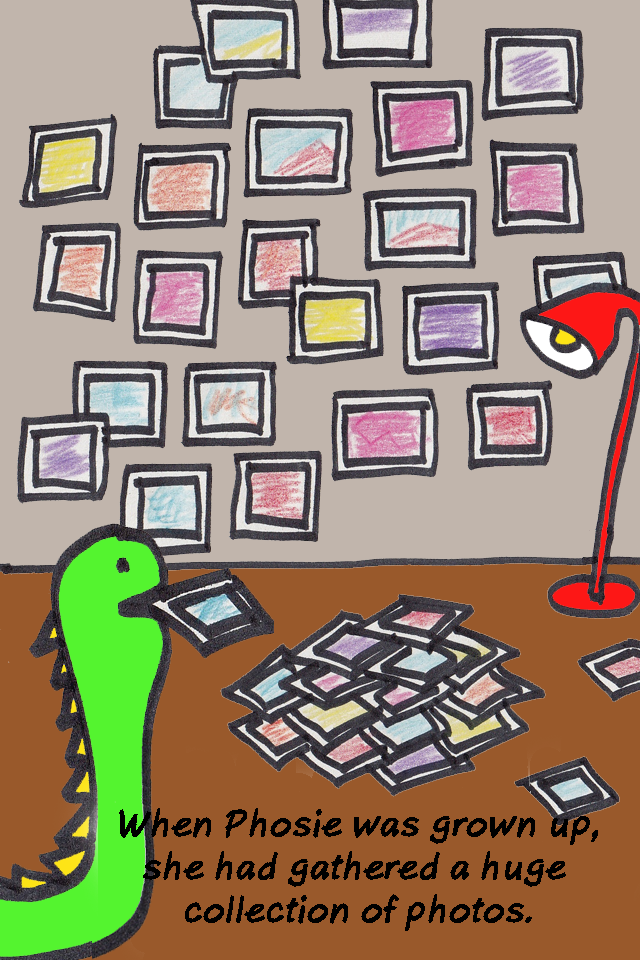
<style>
.page{position:relative;width:640px;height:960px;background:#c1b5ac}
.page>*{position:absolute;margin:0}
.t1{font:36px "AxureHandwriting-BoldItalic";color:#000000}
</style>
<div class="page">
<p class="t1" style="left:119px;top:808px;width:479px;height:123px;text-align:center">When Phosie was grown up,<br>she had gathered a huge <br>collection of photos.</p>
</div>
